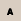
<style>
.page{position:relative;width:21px;height:21px;background:#d9cdc1}
.page>*{position:absolute;margin:0}
.t1{font:9px "Tahoma-Bold";color:#000000}
</style>
<div class="page">
<p class="t1" style="left:7px;top:8px;width:7px;height:7px">A</p>
</div>
